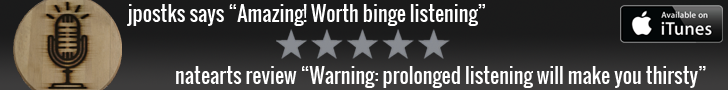
<style>
.page{position:relative;width:728px;height:90px}
.page>*{position:absolute;margin:0}
.t1{font:20px "Oswald-Regular";color:#ffffff}
</style>
<div class="page">
<p class="t1" style="left:127px;top:4px;width:358px;height:22px">jpostks says “Amazing! Worth binge listening”</p>
<p class="t1" style="left:176px;top:66px;width:530px;height:22px">natearts review “Warning: prolonged listening will make you thirsty”</p>
</div>
